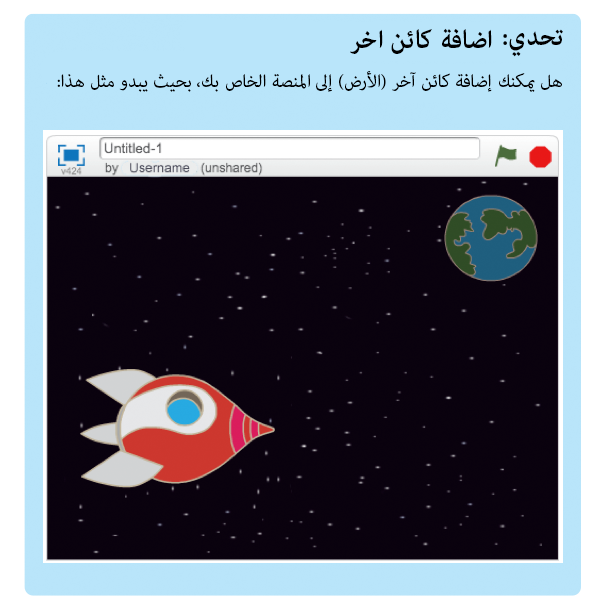
<style>
.page{position:relative;width:601px;height:613px;background:#0a020e}
.page>*{position:absolute;margin:0}
.t1{font:36px "AdobeArabic-Bold";color:#000000}
.t2{font:25px "AdobeArabic-Regular";color:#000000}
</style>
<div class="page">
<p class="t1" style="left:350px;top:28px;width:142px;height:26px">اضافة كائن اخر</p>
<p class="t1" style="left:503px;top:29px;width:60px;height:28px">تحدي:</p>
<p class="t2" style="left:57px;top:71px;width:505px;height:21px">هل يمكنك إضافة كائن آخر (الأرض) إلى المنصة الخاص بك، بحيث يبدو مثل هذا:</p>
</div>
